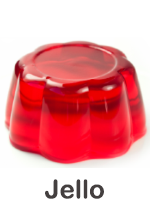
<style>
.page{position:relative;width:150px;height:210px;background:#ffffff}
.page>*{position:absolute;margin:0}
.t1{font:26px "ArialRoundedMTBold";color:#443f3f}
</style>
<div class="page">
<p class="t1" style="left:45px;top:179px;width:59px;height:20px">Jello</p>
</div>
